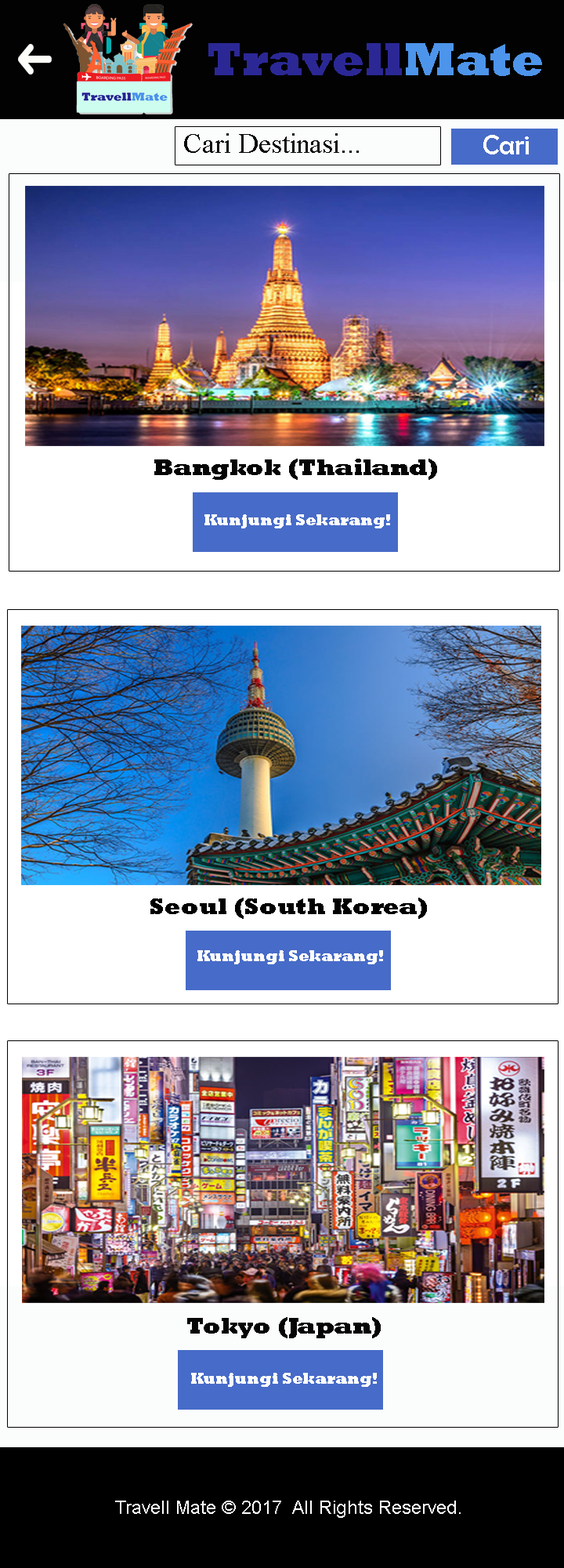
<style>
.page{position:relative;width:564px;height:1568px;background:#ffffff}
.page>*{position:absolute;margin:0}
.t1{font:47px "Rockwell-ExtraBold";color:#2b2896}
.t2{font:47px "Rockwell-ExtraBold";color:#4d94eb}
.t3{font:28.2px "TimesNewRomanPSMT";color:#0a0a0a}
.t4{font:28.2px "BerlinSansFB-Reg";color:#fdfefc}
.t5{font:23.5px "Rockwell-ExtraBold";color:#050505}
.t6{font:15.7px "Rockwell-ExtraBold";color:#fdfcfa}
.t7{font:23.5px "Rockwell-ExtraBold";color:#010101}
.t8{font:15.7px "Rockwell-ExtraBold";color:#fcfcfb}
.t9{font:18.8px "ArialMT";color:#fefefd}
</style>
<div class="page">
<p class="t1" style="left:209px;top:43px;width:334px;height:33px">Travell<span class="t2">Mate</span></p>
<p class="t3" style="left:184px;top:133px;width:175px;height:20px">Cari Destinasi...</p>
<p class="t4" style="left:484px;top:135px;width:45px;height:19px">Cari</p>
<p class="t5" style="left:154px;top:459px;width:283px;height:21px">Bangkok (Thailand)</p>
<p class="t6" style="left:205px;top:514px;width:185px;height:14px">Kunjungi Sekarang!</p>
<p class="t7" style="left:151px;top:898px;width:276px;height:21px">Seoul (South Korea)</p>
<p class="t6" style="left:198px;top:950px;width:185px;height:14px">Kunjungi Sekarang!</p>
<p class="t5" style="left:187px;top:1317px;width:194px;height:21px">Tokyo (Japan)</p>
<p class="t8" style="left:191px;top:1373px;width:186px;height:14px">Kunjungi Sekarang!</p>
<p class="t9" style="left:115px;top:1501px;width:346px;height:17px">Travell Mate © 2017  All Rights Reserved.</p>
</div>
